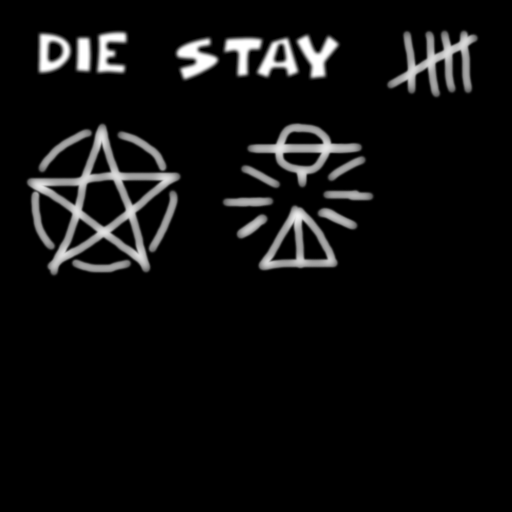
<style>
.page{position:relative;width:512px;height:512px;background:#000000}
.page>*{position:absolute;margin:0}
.t1{font:29.4px "ComicalCartoon"}
.t2{font:29.4px/22px "ComicalCartoon"}
</style>
<div class="page">
<p class="t1" style="left:36px;top:29px;width:94px;height:47px">DIE</p>
<p class="t2" style="left:173px;top:31px;width:170px;height:52px">STAY</p>
</div>
